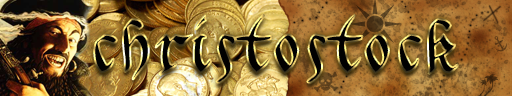
<style>
.page{position:relative;width:512px;height:96px}
.page>*{position:absolute;margin:0}
.t1{font:75px "Xenippa";letter-spacing:0.12em;color:#010101;scale:0.8 1}
</style>
<div class="page">
<p class="t1" style="left:94px;top:14px;width:364px;height:69px">christostock</p>
</div>
